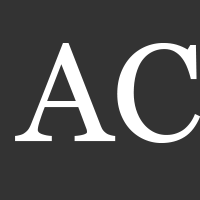
<style>
.page{position:relative;width:200px;height:200px;background:#333333}
.page>*{position:absolute;margin:0}
.t1{font:139.5px "Georgia";color:#ffffff}
</style>
<div class="page">
<p class="t1" style="left:15px;top:43px;width:186px;height:100px">AC</p>
</div>
